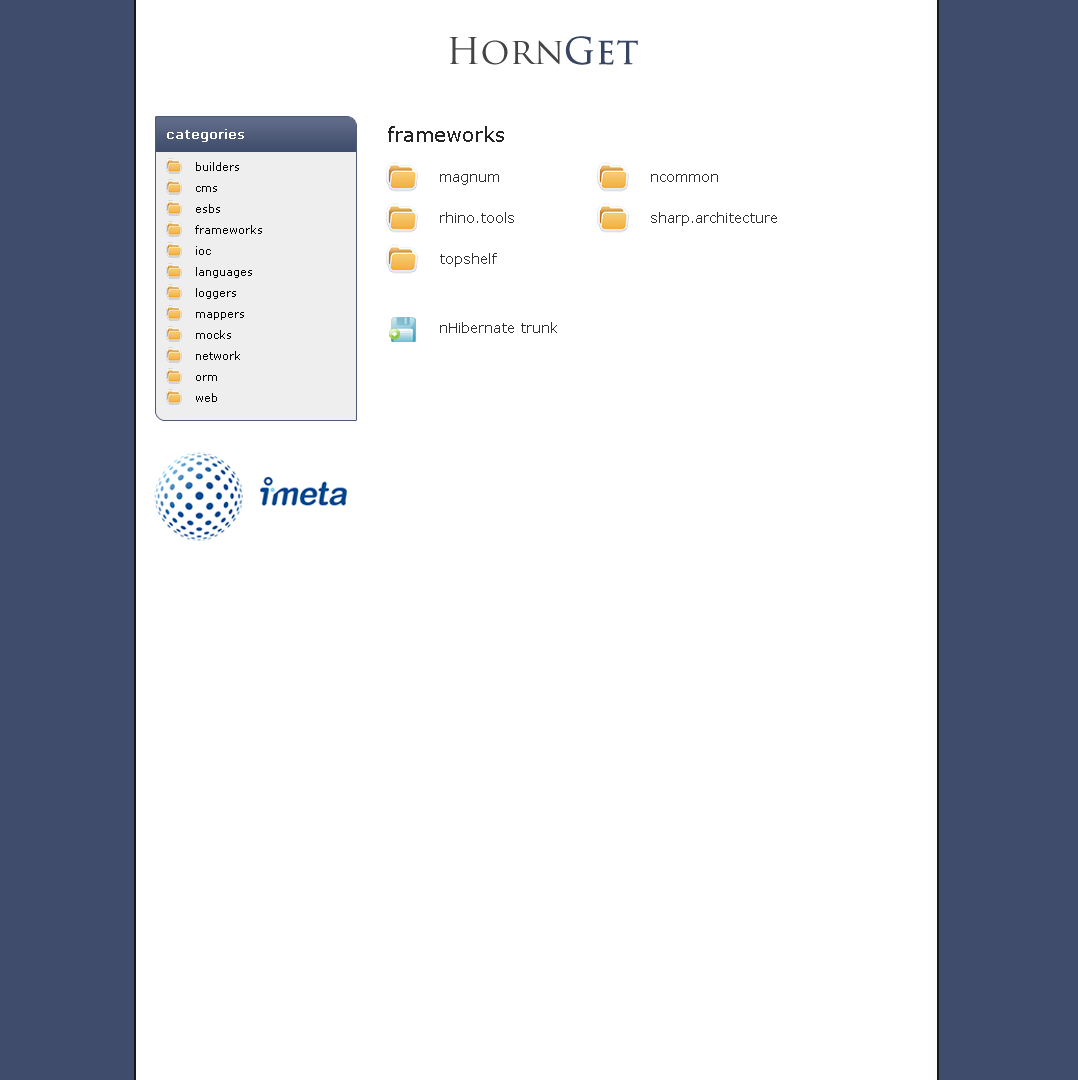
<style>
.page{position:relative;width:1078px;height:1080px;background:#ffffff}
.page>*{position:absolute;margin:0}
.t1{font:36px "TrajanPro-Regular";color:#444444}
.t2{font:36px "TrajanPro-Regular";color:#384664;font-weight:bold}
.t3{font:20px "Verdana";color:#242424}
.t4{font:13px "Verdana";color:#ffffff;font-weight:bold}
.t5{font:11px "Verdana";color:#020202}
.t6{font:14px "Verdana";color:#2e2e2e}
</style>
<div class="page">
<p class="t1" style="left:449px;top:36px;width:189px;height:29px">Horn<span class="t2">Get</span></p>
<p class="t3" style="left:388px;top:126px;width:116px;height:16px">frameworks</p>
<p class="t4" style="left:167px;top:129px;width:77px;height:13px">categories</p>
<p class="t5" style="left:196px;top:162px;width:43px;height:9px">builders</p>
<p class="t6" style="left:440px;top:174px;width:59px;height:11px">magnum</p>
<p class="t6" style="left:651px;top:174px;width:67px;height:8px">ncommon</p>
<p class="t5" style="left:196px;top:186px;width:21px;height:6px">cms</p>
<p class="t5" style="left:196px;top:204px;width:24px;height:9px">esbs</p>
<p class="t6" style="left:440px;top:212px;width:74px;height:11px">rhino.tools</p>
<p class="t6" style="left:651px;top:212px;width:126px;height:14px">sharp.architecture</p>
<p class="t5" style="left:195px;top:225px;width:67px;height:9px">frameworks</p>
<p class="t5" style="left:196px;top:246px;width:15px;height:9px">ioc</p>
<p class="t6" style="left:440px;top:253px;width:57px;height:14px">topshelf</p>
<p class="t5" style="left:196px;top:267px;width:56px;height:11px">languages</p>
<p class="t5" style="left:196px;top:288px;width:40px;height:11px">loggers</p>
<p class="t5" style="left:196px;top:312px;width:48px;height:8px">mappers</p>
<p class="t6" style="left:440px;top:322px;width:117px;height:11px">nHibernate trunk</p>
<p class="t5" style="left:196px;top:330px;width:35px;height:9px">mocks</p>
<p class="t5" style="left:196px;top:351px;width:44px;height:9px">network</p>
<p class="t5" style="left:196px;top:375px;width:21px;height:6px">orm</p>
<p class="t5" style="left:196px;top:393px;width:21px;height:9px">web</p>
</div>
